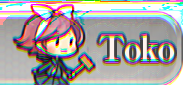
<style>
.page{position:relative;width:183px;height:85px}
.page>*{position:absolute;margin:0}
.t1{font:34px "RyuminPro-ExBold";letter-spacing:-0.08em}
</style>
<div class="page">
<p class="t1" style="left:99px;top:33px;width:76px;height:27px">Toko</p>
</div>
